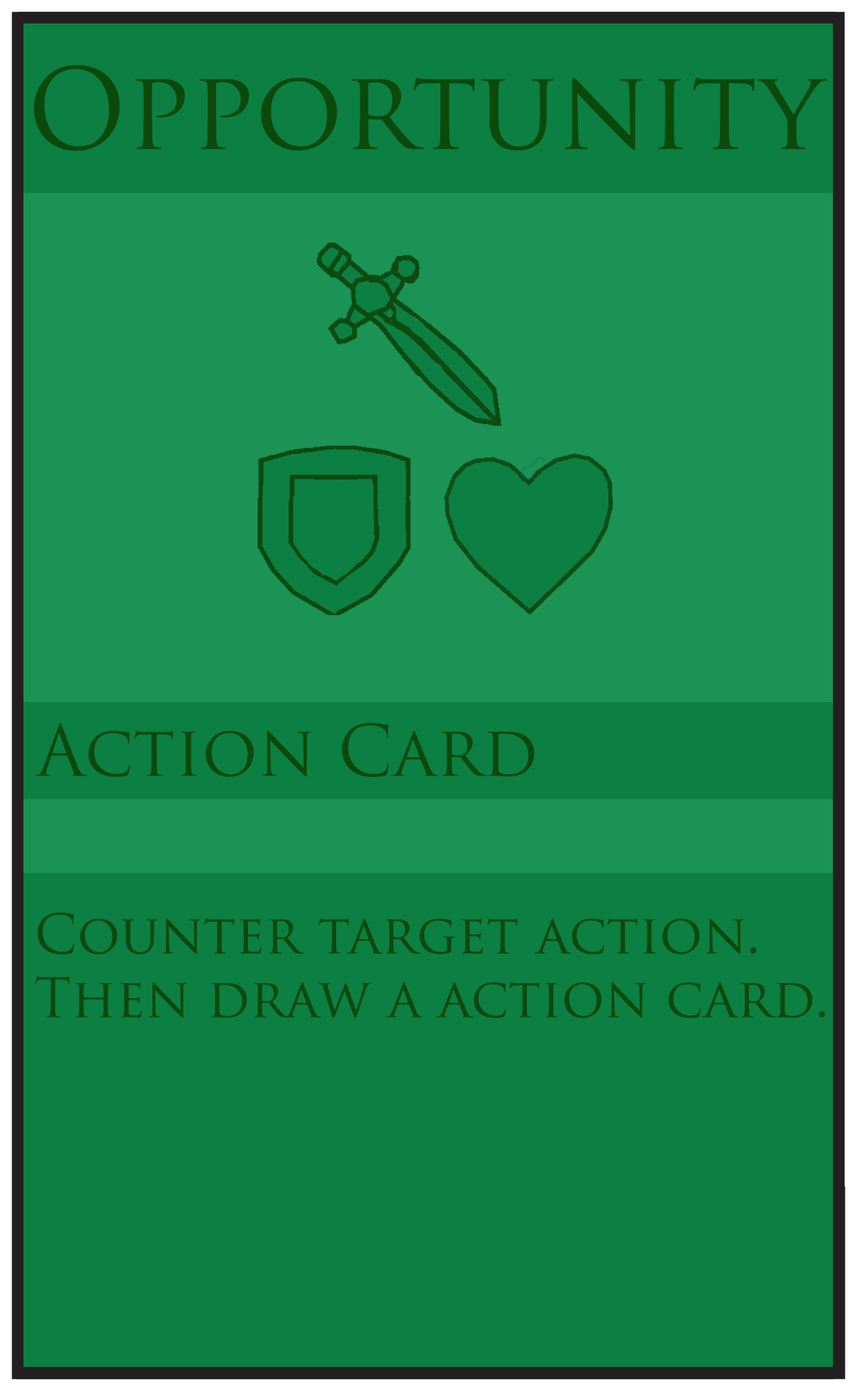
<style>
.page{position:relative;width:857px;height:1391px;background:#0c7f42}
.page>*{position:absolute;margin:0}
.t1{font:109.1px "TrajanPro-Regular";color:#0c4a0c}
.t2{font:68.9px "TrajanPro-Regular";color:#0c4a0c}
.t3{font:53.1px "TrajanPro-Regular";color:#0c4a0c}
</style>
<div class="page">
<p class="t1" style="left:34px;top:65px;width:793px;height:86px">Opportunity</p>
<p class="t2" style="left:34px;top:723px;width:501px;height:54px">Action Card</p>
<p class="t3" style="left:35px;top:912px;width:790px;height:106px">Counter target action. <br>Then draw a action card.</p>
</div>
